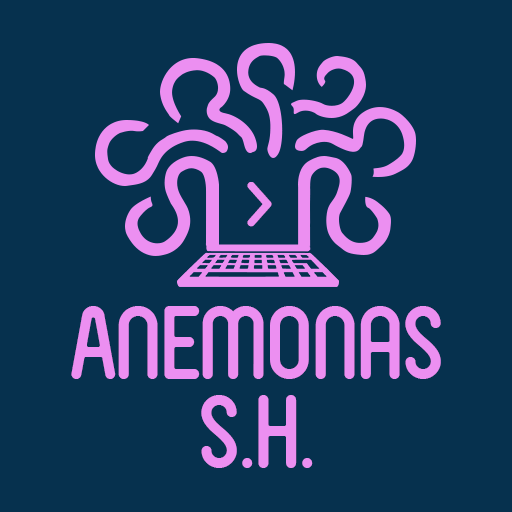
<style>
.page{position:relative;width:512px;height:512px;background:#06314e}
.page>*{position:absolute;margin:0}
.t1{font:76.2px "FVAlmelo";letter-spacing:-0.03em;color:#ec8ff1}
.t2{font:100px/89px "FVAlmelo";letter-spacing:-0.03em;color:#ec8ff1}
</style>
<div class="page">
<p class="t1" style="left:247px;top:182px;width:25px;height:45px">&gt;</p>
<p class="t2" style="left:71px;top:306px;width:370px;height:162px;text-align:center">Anemonas<br>S.H.</p>
</div>
